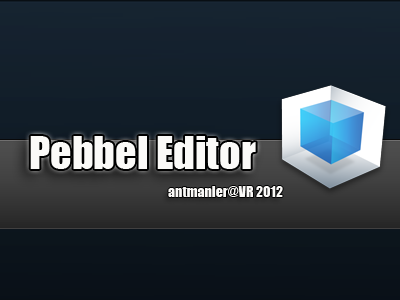
<style>
.page{position:relative;width:400px;height:300px}
.page>*{position:absolute;margin:0}
.t1{font:42px "Impact";color:#fbfaf8}
.t2{font:14px "Impact";color:#fbfaf8}
</style>
<div class="page">
<p class="t1" style="left:30px;top:136px;width:226px;height:33px">Pebbel Editor</p>
<p class="t2" style="left:168px;top:186px;width:115px;height:11px">antmanler@VR 2012</p>
</div>
